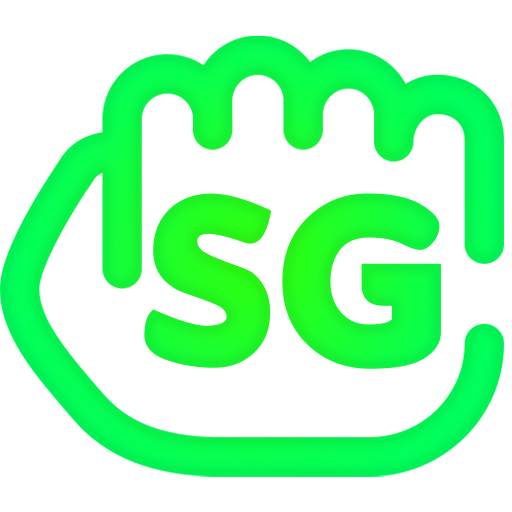
<style>
.page{position:relative;width:512px;height:512px;background:#ffffff}
.page>*{position:absolute;margin:0}
.t1{font:255.5px "Insaniburger-with-Cheese";letter-spacing:0.015em;color:#1cfb2a}
</style>
<div class="page">
<p class="t1" style="left:144px;top:193px;width:297px;height:176px">SG</p>
</div>
